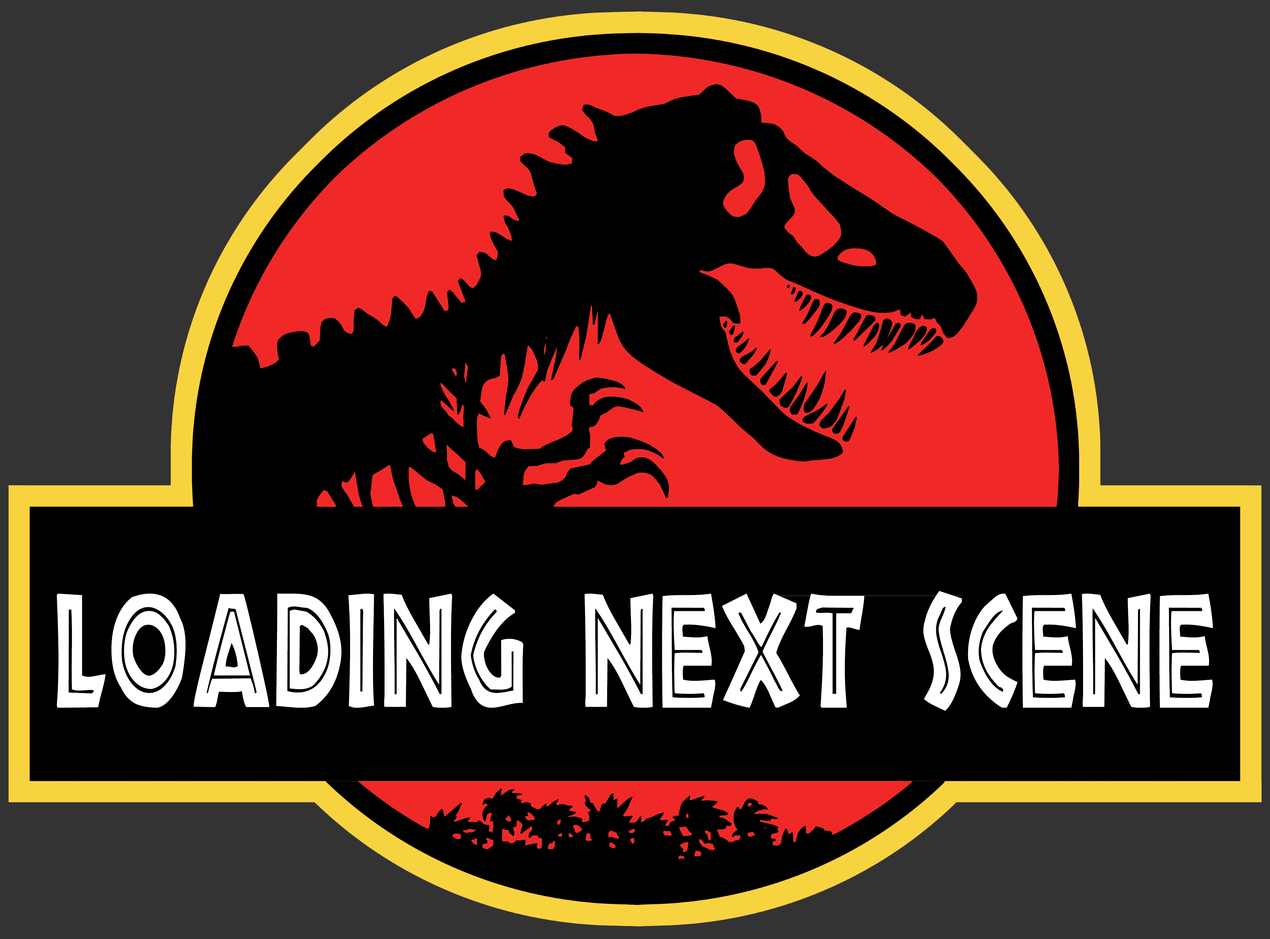
<style>
.page{position:relative;width:1270px;height:939px;background:#000000}
.page>*{position:absolute;margin:0}
.t1{font:149.6px "Tribeca";color:#ffffff;scale:0.63 1}
</style>
<div class="page">
<p class="t1" style="left:57px;top:591px;width:1156px;height:120px">Loading next scene</p>
</div>
